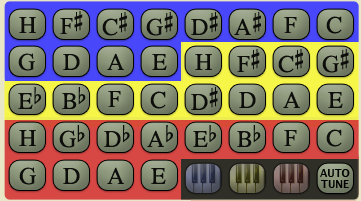
<style>
.page{position:relative;width:361px;height:201px}
.page>*{position:absolute;margin:0}
.t1{font:24px "OpusChords";color:#000000}
.t2{font:10px "LucidaGrande-Bold";color:#000000}
.t3{font:11px "LucidaGrande";color:#000000}
</style>
<div class="page">
<p class="t1" style="left:19px;top:17px;width:17px;height:16px;opacity:0.9">H</p>
<p class="t1" style="left:60px;top:11px;width:23px;height:23px;opacity:0.9">F#</p>
<p class="t1" style="left:102px;top:12px;width:25px;height:24px;opacity:0.9">C#</p>
<p class="t1" style="left:146px;top:12px;width:27px;height:24px;opacity:0.9">G#</p>
<p class="t1" style="left:191px;top:12px;width:27px;height:23px;opacity:0.9">D#</p>
<p class="t1" style="left:234px;top:12px;width:27px;height:23px;opacity:0.9">A#</p>
<p class="t1" style="left:284px;top:17px;width:13px;height:16px;opacity:0.9">F</p>
<p class="t1" style="left:326px;top:16px;width:16px;height:18px;opacity:0.9">C</p>
<p class="t1" style="left:18px;top:53px;width:17px;height:18px;opacity:0.9">G</p>
<p class="t1" style="left:63px;top:54px;width:17px;height:16px;opacity:0.9">D</p>
<p class="t1" style="left:107px;top:53px;width:17px;height:17px;opacity:0.9">A</p>
<p class="t1" style="left:152px;top:54px;width:15px;height:16px;opacity:0.9">E</p>
<p class="t1" style="left:195px;top:54px;width:17px;height:16px;opacity:0.9">H</p>
<p class="t1" style="left:237px;top:49px;width:23px;height:23px;opacity:0.9">F#</p>
<p class="t1" style="left:278px;top:49px;width:25px;height:24px;opacity:0.9">C#</p>
<p class="t1" style="left:322px;top:49px;width:27px;height:24px;opacity:0.9">G#</p>
<p class="t1" style="left:18px;top:87px;width:24px;height:22px;opacity:0.9">Eb</p>
<p class="t1" style="left:62px;top:87px;width:24px;height:22px;opacity:0.9">Bb</p>
<p class="t1" style="left:191px;top:87px;width:27px;height:23px;opacity:0.9">D#</p>
<p class="t1" style="left:108px;top:91px;width:13px;height:16px;opacity:0.9">F</p>
<p class="t1" style="left:150px;top:91px;width:16px;height:18px;opacity:0.9">C</p>
<p class="t1" style="left:239px;top:92px;width:17px;height:16px;opacity:0.9">D</p>
<p class="t1" style="left:283px;top:91px;width:17px;height:17px;opacity:0.9">A</p>
<p class="t1" style="left:328px;top:92px;width:15px;height:16px;opacity:0.9">E</p>
<p class="t1" style="left:59px;top:125px;width:26px;height:23px;opacity:0.9">Gb</p>
<p class="t1" style="left:104px;top:125px;width:26px;height:22px;opacity:0.9">Db</p>
<p class="t1" style="left:147px;top:125px;width:26px;height:22px;opacity:0.9">Ab</p>
<p class="t1" style="left:193px;top:125px;width:24px;height:22px;opacity:0.9">Eb</p>
<p class="t1" style="left:237px;top:125px;width:24px;height:22px;opacity:0.9">Bb</p>
<p class="t1" style="left:19px;top:130px;width:17px;height:16px;opacity:0.9">H</p>
<p class="t1" style="left:284px;top:130px;width:13px;height:16px;opacity:0.9">F</p>
<p class="t1" style="left:326px;top:129px;width:16px;height:18px;opacity:0.9">C</p>
<p class="t1" style="left:19px;top:167px;width:17px;height:18px;opacity:0.9">G</p>
<p class="t1" style="left:63px;top:168px;width:17px;height:16px;opacity:0.9">D</p>
<p class="t1" style="left:107px;top:167px;width:17px;height:17px;opacity:0.9">A</p>
<p class="t1" style="left:151px;top:168px;width:15px;height:16px;opacity:0.9">E</p>
<p class="t2" style="left:320px;top:169px;width:30px;height:8px"><span class="t3"> </span>AUTO</p>
<p class="t2" style="left:321px;top:180px;width:28px;height:8px">TUNE</p>
</div>
